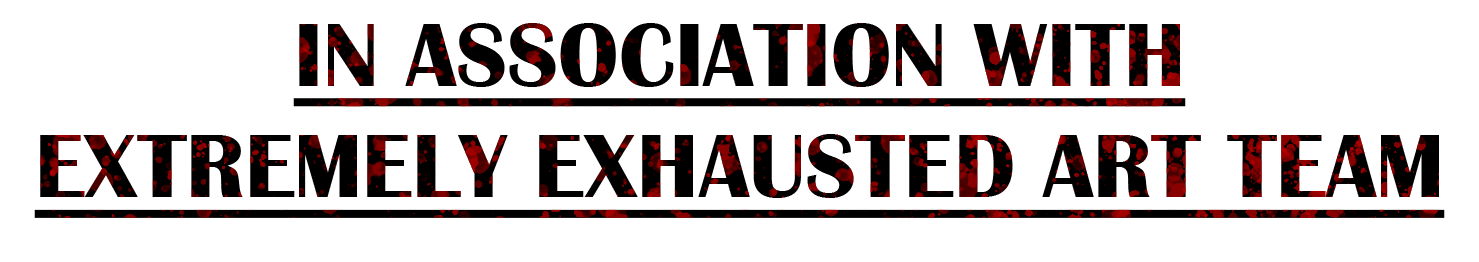
<style>
.page{position:relative;width:1479px;height:262px;background:#ffffff}
.page>*{position:absolute;margin:0}
.t1{font:93px "BritannicBold";color:#000000;text-transform:uppercase;text-decoration:underline}
</style>
<div class="page">
<p class="t1" style="left:34px;top:23px;width:1411px;height:195px;text-align:center">In association with<br>Extremely Exhausted Art Team</p>
</div>
